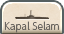
<style>
.page{position:relative;width:64px;height:34px}
.page>*{position:absolute;margin:0}
.t1{font:10px "UDShinGoPro-Light";color:#6a6560;scale:0.9 1}
</style>
<div class="page">
<p class="t1" style="left:4px;top:21px;width:55px;height:12px">Kapal Selam</p>
</div>
